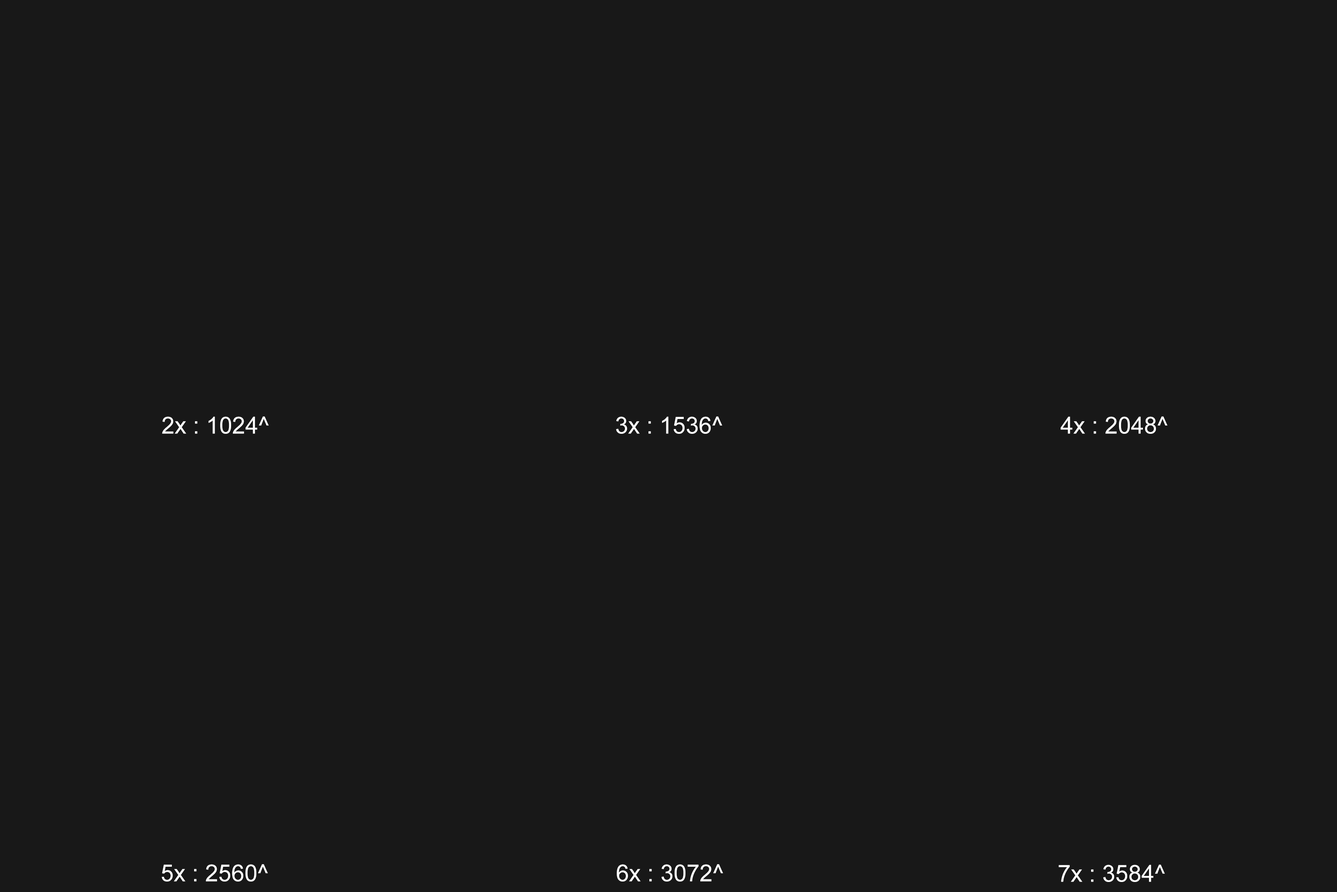
<style>
.page{position:relative;width:1337px;height:892px;background:#181818}
.page>*{position:absolute;margin:0}
.t1{font:23.5px "ArialMT";color:#ffffff}
</style>
<div class="page">
<p class="t1" style="left:162px;top:416px;width:107px;height:18px">2x : 1024^</p>
<p class="t1" style="left:616px;top:416px;width:107px;height:18px">3x : 1536^</p>
<p class="t1" style="left:1061px;top:416px;width:107px;height:18px">4x : 2048^</p>
<p class="t1" style="left:162px;top:864px;width:106px;height:17px">5x : 2560^</p>
<p class="t1" style="left:617px;top:864px;width:107px;height:17px">6x : 3072^</p>
<p class="t1" style="left:1059px;top:864px;width:106px;height:18px">7x : 3584^</p>
</div>
